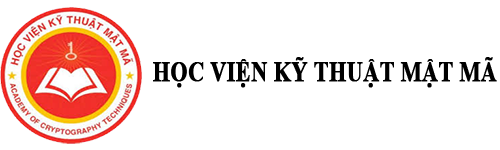
<style>
.page{position:relative;width:500px;height:150px;background:#ffffff}
.page>*{position:absolute;margin:0}
.t1{font:28.6px "TimesNewRomanPS-BoldMT";color:#000000;font-weight:bold;scale:0.77 1}
</style>
<div class="page">
<p class="t1" style="left:153px;top:57px;width:344px;height:31px">HỌC VIỆN KỸ THUẬT MẬT MÃ</p>
</div>
